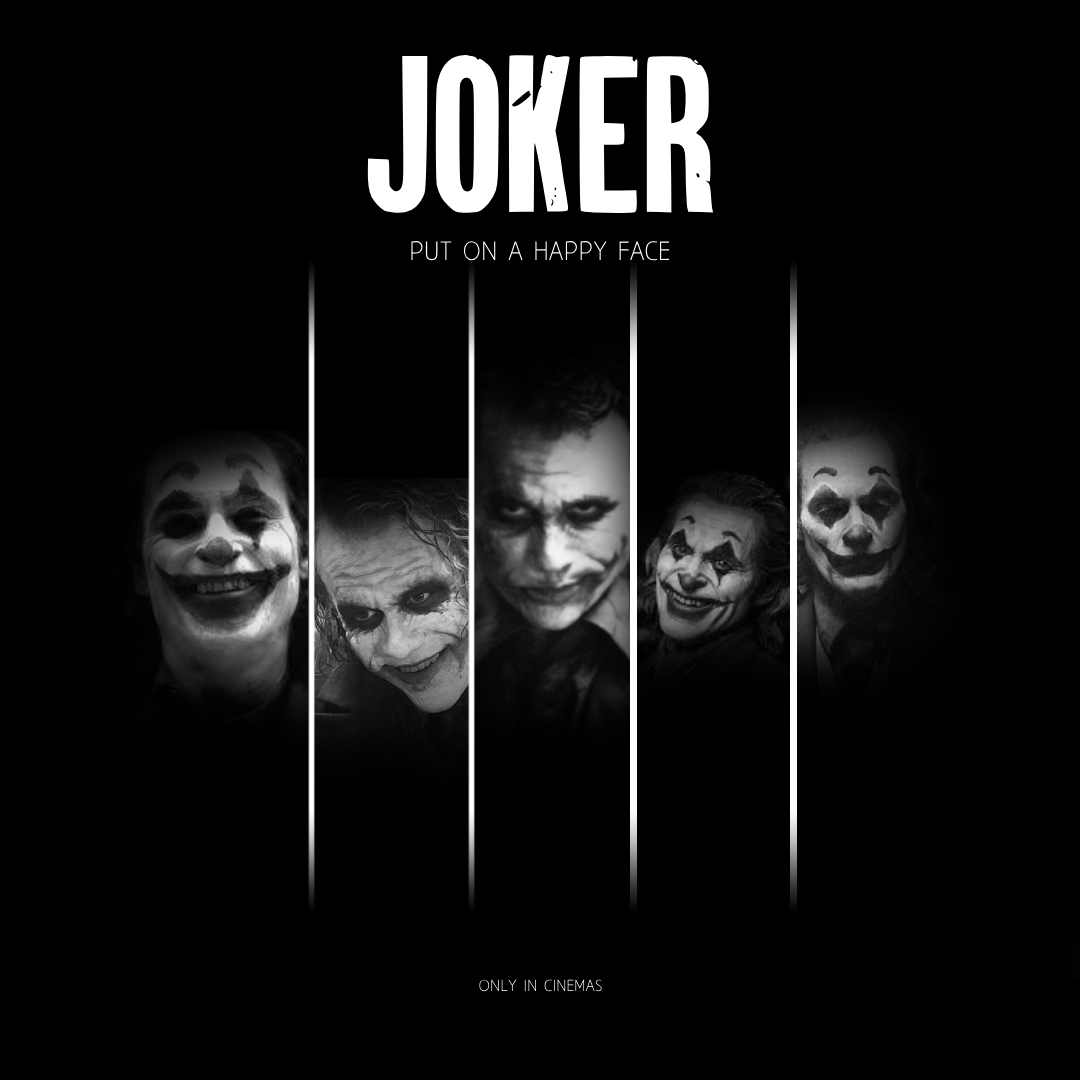
<style>
.page{position:relative;width:1080px;height:1080px;background:#000000}
.page>*{position:absolute;margin:0}
.t1{font:243.6px "GothicJoker";color:#ffffff}
.t2{font:23.2px "AaarghNormal";color:#ffffff;scale:0.97 1}
.t3{font:14px "AaarghNormal";color:#f1f1f1}
</style>
<div class="page">
<p class="t1" style="left:367px;top:55px;width:346px;height:158px">JOKER</p>
<p class="t2" style="left:411px;top:240px;width:259px;height:21px">PUT ON A HAPPY FACE</p>
<p class="t3" style="left:479px;top:979px;width:123px;height:13px">ONLY IN CINEMAS</p>
</div>
